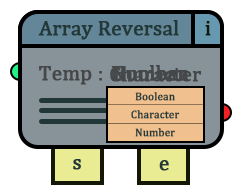
<style>
.page{position:relative;width:244px;height:196px;background:#ffffff}
.page>*{position:absolute;margin:0}
.t1{font:20.8px "Cambria";color:#233939;font-weight:bold}
.t2{font:20.8px "Cambria";color:#141804;font-weight:bold}
.t3{font:20.8px "Cambria";color:#454748;font-weight:bold}
.t4{font:11px "Cambria";color:#233939;font-weight:bold}
</style>
<div class="page">
<p class="t1" style="left:38px;top:20px;width:141px;height:20px">Array Reversal</p>
<p class="t2" style="left:205px;top:21px;width:6px;height:15px">i</p>
<p class="t3" style="left:111px;top:65px;width:77px;height:16px">Number</p>
<p class="t3" style="left:113px;top:65px;width:76px;height:16px">Boolean</p>
<p class="t3" style="left:39px;top:66px;width:63px;height:19px">Temp :</p>
<p class="t3" style="left:110px;top:66px;width:92px;height:16px">Character</p>
<p class="t4" style="left:135px;top:92px;width:40px;height:9px">Boolean</p>
<p class="t4" style="left:131px;top:110px;width:49px;height:9px">Character</p>
<p class="t4" style="left:135px;top:128px;width:40px;height:9px">Number</p>
<p class="t1" style="left:73px;top:159px;width:8px;height:11px">s</p>
<p class="t1" style="left:159px;top:160px;width:10px;height:11px">e</p>
</div>
